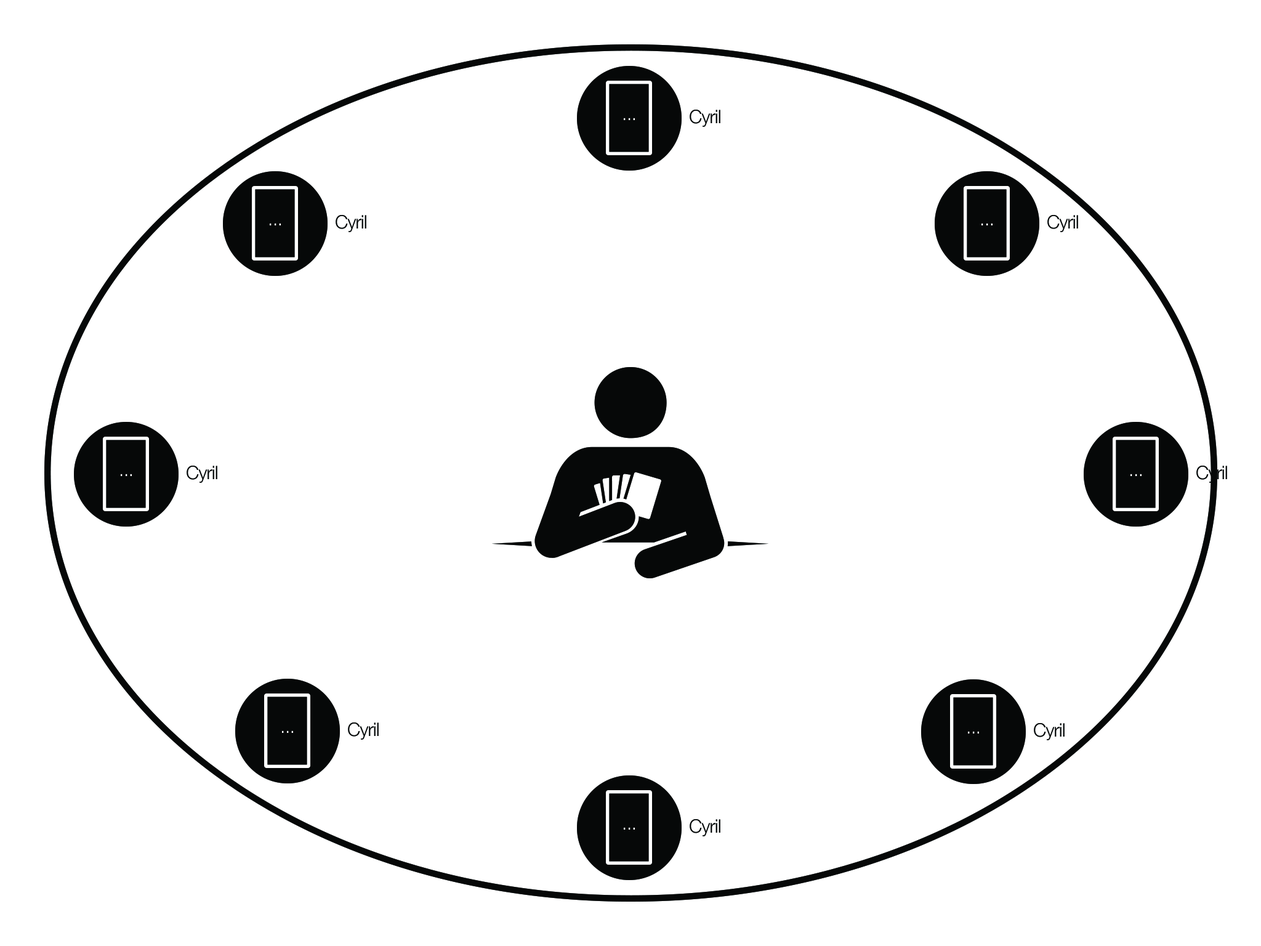
<style>
.page{position:relative;width:1261px;height:946px;background:#ffffff}
.page>*{position:absolute;margin:0}
.t1{font:18.5px "HelveticaNeue-Light";letter-spacing:-0.025em;color:#060808}
.t2{font:18.5px "HelveticaNeue-Light";letter-spacing:-0.025em;color:#ffffff}
</style>
<div class="page">
<p class="t1" style="left:690px;top:110px;width:30px;height:17px">Cyril</p>
<p class="t2" style="left:624px;top:118px;width:11px;height:2px">...</p>
<p class="t1" style="left:336px;top:215px;width:30px;height:17px">Cyril</p>
<p class="t1" style="left:1047px;top:215px;width:31px;height:17px">Cyril</p>
<p class="t2" style="left:270px;top:223px;width:11px;height:2px">...</p>
<p class="t2" style="left:981px;top:223px;width:11px;height:2px">...</p>
<p class="t2" style="left:121px;top:473px;width:11px;height:3px">...</p>
<p class="t1" style="left:187px;top:465px;width:30px;height:18px">Cyril</p>
<p class="t2" style="left:1130px;top:473px;width:11px;height:3px">...</p>
<p class="t1" style="left:1196px;top:465px;width:31px;height:18px">Cyril</p>
<p class="t1" style="left:348px;top:722px;width:31px;height:17px">Cyril</p>
<p class="t1" style="left:1034px;top:723px;width:31px;height:17px">Cyril</p>
<p class="t2" style="left:282px;top:730px;width:11px;height:3px">...</p>
<p class="t2" style="left:968px;top:731px;width:11px;height:2px">...</p>
<p class="t1" style="left:690px;top:819px;width:30px;height:17px">Cyril</p>
<p class="t2" style="left:624px;top:827px;width:11px;height:2px">...</p>
</div>
